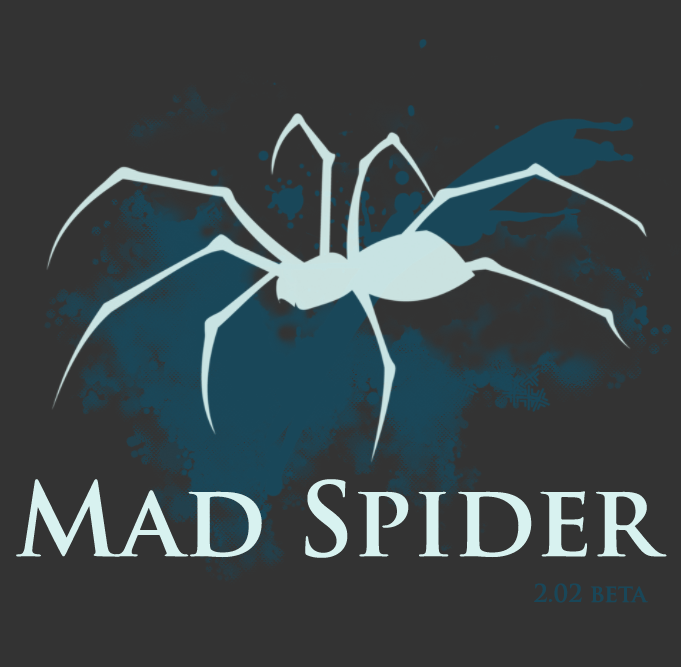
<style>
.page{position:relative;width:681px;height:667px;background:#333333}
.page>*{position:absolute;margin:0}
.t1{font:100px "TrajanPro-Bold";color:#d8f2f0}
.t2{font:24px "TrajanPro-Bold";color:#194759}
</style>
<div class="page">
<p class="t1" style="left:16px;top:479px;width:651px;height:79px">Mad Spider</p>
<p class="t2" style="left:534px;top:583px;width:114px;height:20px">2.02 beta</p>
</div>
